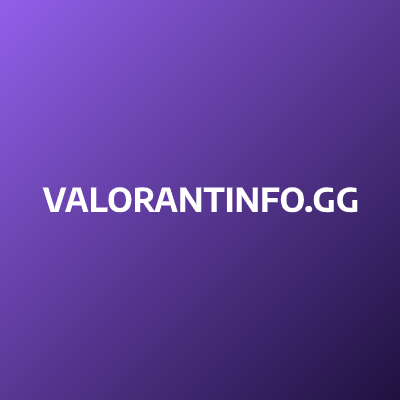
<style>
.page{position:relative;width:400px;height:400px}
.page>*{position:absolute;margin:0}
.t1{font:33px "EncodeSans-Bold";color:#ffffff}
</style>
<div class="page">
<p class="t1" style="left:42px;top:187px;width:316px;height:26px">VALORANTINFO.GG</p>
</div>
